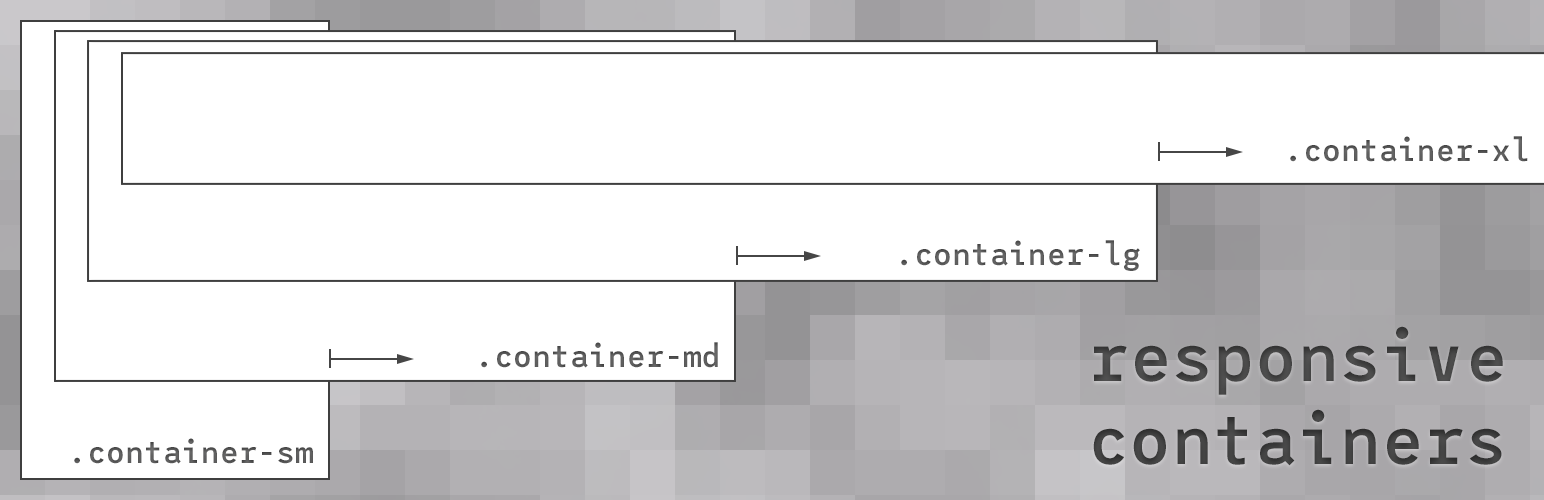
<style>
.page{position:relative;width:1544px;height:500px;background:#ffffff}
.page>*{position:absolute;margin:0}
.t1{font:31px "LeagueMono-Medium";letter-spacing:0.01em;color:#5b5b5b}
.t2{font:31px "LeagueMono-Medium";letter-spacing:0.01em;color:#5c5c5c}
.t3{font:69px "LeagueMono-Medium";letter-spacing:0.01em;color:#424242}
.t4{font:31px "LeagueMono-Medium";letter-spacing:0.01em;color:#5a5a5b}
</style>
<div class="page">
<p class="t1" style="left:1290px;top:136px;width:238px;height:26px">.container-xl</p>
<p class="t2" style="left:901px;top:240px;width:239px;height:31px">.container-lg</p>
<p class="t3" style="left:1093px;top:326px;width:410px;height:140px">responsive<br>containers</p>
<p class="t1" style="left:481px;top:342px;width:237px;height:26px">.container-md</p>
<p class="t4" style="left:74px;top:438px;width:239px;height:26px">.container-sm</p>
</div>
